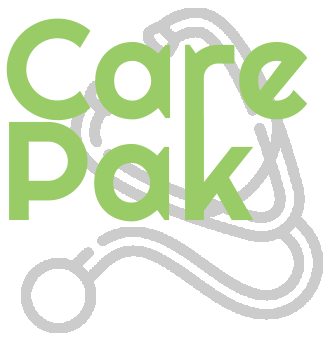
<style>
.page{position:relative;width:333px;height:343px;background:#ffffff}
.page>*{position:absolute;margin:0}
.t1{font:140px "Righteous-Regular";letter-spacing:0.01em;color:#99cc66}
</style>
<div class="page">
<p class="t1" style="left:6px;top:18px;width:302px;height:103px">Care</p>
<p class="t1" style="left:9px;top:117px;width:245px;height:105px">Pak</p>
</div>
